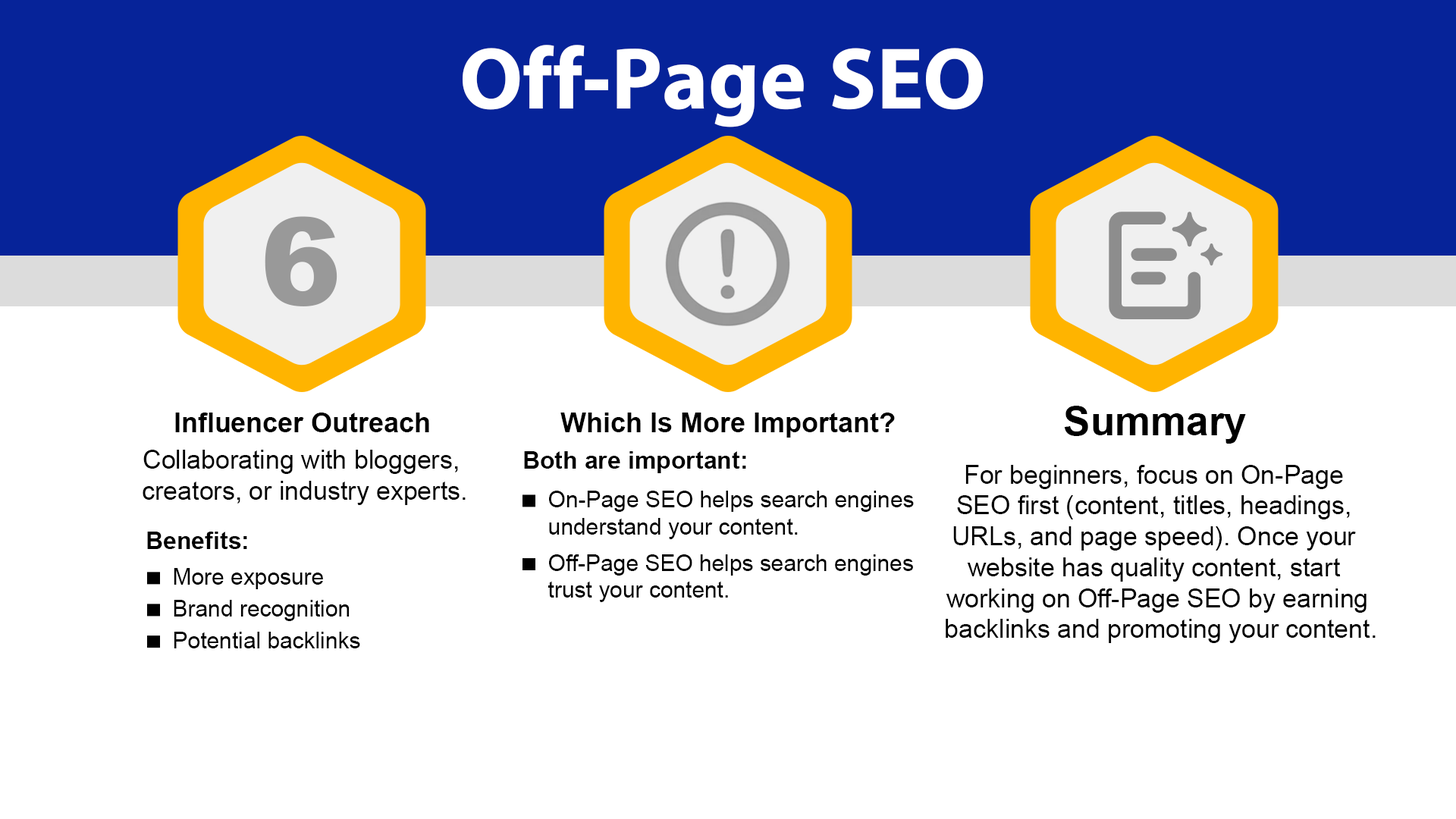
<style>
.page{position:relative;width:1456px;height:819px;background:#ffffff}
.page>*{position:absolute;margin:0}
.t1{font:88px "iKampuchea001_O'Chrov";color:#ffffff}
.t2{font:121px "Arial-Black";color:#999999}
.t3{font:27.3px "Arial-BoldMT";color:#000000}
.t4{font:40.1px "Arial-BoldMT";color:#000000}
.t5{font:25.8px "ArialMT";color:#000000}
.t6{font:24.2px "Arial-BoldMT";color:#000000}
.t7{font:22.7px "ArialMT";color:#000000}
.t8{font:24.3px "Arial-BoldMT";color:#000000}
</style>
<div class="page">
<p class="t1" style="left:463px;top:45px;width:521px;height:82px">Off-Page SEO</p>
<p class="t2" style="left:265px;top:216px;width:72px;height:90px">6</p>
<p class="t3" style="left:175px;top:413px;width:254px;height:19px">Influencer Outreach</p>
<p class="t3" style="left:560px;top:413px;width:335px;height:25px">Which Is More Important?</p>
<p class="t4" style="left:1064px;top:406px;width:182px;height:38px">Summary</p>
<p class="t5" style="left:143px;top:450px;width:323px;height:55px;text-align:center">Collaborating with bloggers, <br>creators, or industry experts.</p>
<p class="t6" style="left:524px;top:451px;width:222px;height:22px">Both are important:</p>
<p class="t5" style="left:946px;top:465px;width:430px;height:178px;text-align:center">For beginners, focus on On-Page <br>SEO first (content, titles, headings, <br>URLs, and page speed). Once your <br>website has quality content, start <br>working on Off-Page SEO by earning<br> backlinks and promoting your content.</p>
<p class="t7" style="left:549px;top:491px;width:365px;height:48px">On-Page SEO helps search engines <br>understand your content.</p>
<p class="t8" style="left:147px;top:532px;width:100px;height:17px">Benefits:</p>
<p class="t7" style="left:548px;top:554px;width:365px;height:48px">Off-Page SEO helps search engines <br>trust your content.</p>
<p class="t7" style="left:174px;top:568px;width:149px;height:21px">More exposure</p>
<p class="t7" style="left:174px;top:600px;width:176px;height:21px">Brand recognition</p>
<p class="t7" style="left:174px;top:632px;width:186px;height:16px">Potential backlinks</p>
</div>
